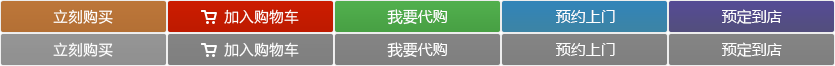
<style>
.page{position:relative;width:835px;height:66px}
.page>*{position:absolute;margin:0}
.t1{font:15px "MicrosoftYaHei";color:#ffffff}
</style>
<div class="page">
<p class="t1" style="left:387px;top:9px;width:60px;height:16px">我要代购</p>
<p class="t1" style="left:555px;top:10px;width:60px;height:13px">预约上门</p>
<p class="t1" style="left:721px;top:9px;width:61px;height:15px">预定到店</p>
<p class="t1" style="left:387px;top:42px;width:60px;height:16px">我要代购</p>
<p class="t1" style="left:555px;top:43px;width:60px;height:13px">预约上门</p>
<p class="t1" style="left:721px;top:42px;width:61px;height:15px">预定到店</p>
</div>
